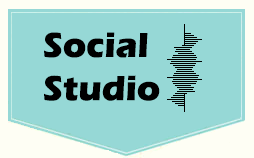
<style>
.page{position:relative;width:254px;height:158px;background:#96d8d6}
.page>*{position:absolute;margin:0}
.t1{font:36px "ErasITC-Bold";color:#000000}
</style>
<div class="page">
<p class="t1" style="left:44px;top:32px;width:116px;height:69px">Social <br>Studio</p>
</div>
